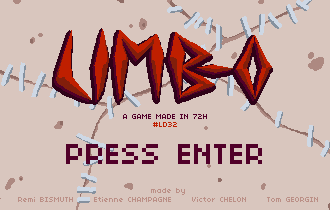
<style>
.page{position:relative;width:330px;height:210px;background:#d9c6be}
.page>*{position:absolute;margin:0}
.t1{font:8px "04b03";color:#510029}
.t2{font:8px "04b03";color:#bf1f00}
.t3{font:32px "04b03";color:#510029}
.t4{font:8px/9px "04b03";color:#bb8f86}
</style>
<div class="page">
<p class="t1" style="left:123px;top:114px;width:84px;height:5px">A GAME MADE IN 72H</p>
<p class="t2" style="left:153px;top:122px;width:24px;height:5px">#LD32</p>
<p class="t3" style="left:66px;top:144px;width:196px;height:20px">PRESS ENTER</p>
<p class="t4" style="left:18px;top:188px;width:300px;height:14px;text-align:center">made by<br>Remi BISMUTH     Etienne CHAMPAGNE     Victor CHELON     Tom GEORGIN</p>
</div>
